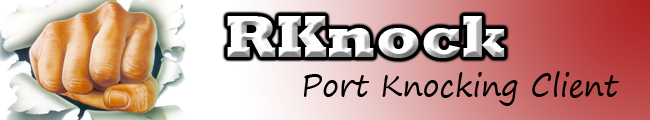
<style>
.page{position:relative;width:650px;height:120px}
.page>*{position:absolute;margin:0}
.t1{font:60px "Rockwell-ExtraBold";color:#fefefe}
.t2{font:30px "SegoePrint";color:#000000}
</style>
<div class="page">
<p class="t1" style="left:227px;top:16px;width:278px;height:42px">RKnock</p>
<p class="t2" style="left:304px;top:71px;width:315px;height:35px">Port Knocking Client</p>
</div>
